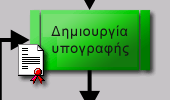
<style>
.page{position:relative;width:170px;height:100px;background:#c6c3c6}
.page>*{position:absolute;margin:0}
.t1{font:14px "ArialMT";letter-spacing:0.05em;color:#161616}
</style>
<div class="page">
<p class="t1" style="left:51px;top:25px;width:78px;height:31px">Δημιουργία<br>υπογραφής</p>
</div>
